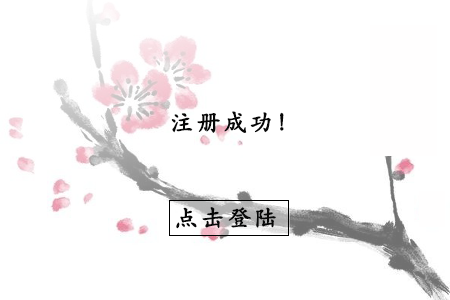
<style>
.page{position:relative;width:450px;height:300px;background:#ffffff}
.page>*{position:absolute;margin:0}
.t1{font:24px "STKaiti";letter-spacing:0.081em;color:#070707;text-transform:uppercase;font-weight:bold}
</style>
<div class="page">
<p class="t1" style="left:171px;top:111px;width:113px;height:22px">注册成功！</p>
<p class="t1" style="left:176px;top:207px;width:100px;height:22px">点击登陆</p>
</div>
